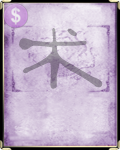
<style>
.page{position:relative;width:120px;height:150px}
.page>*{position:absolute;margin:0}
.t1{font:100px "FZGLJW--GB1-0";color:#908596}
</style>
<div class="page">
<p class="t1" style="left:19px;top:28px;width:84px;height:61px">术</p>
</div>
